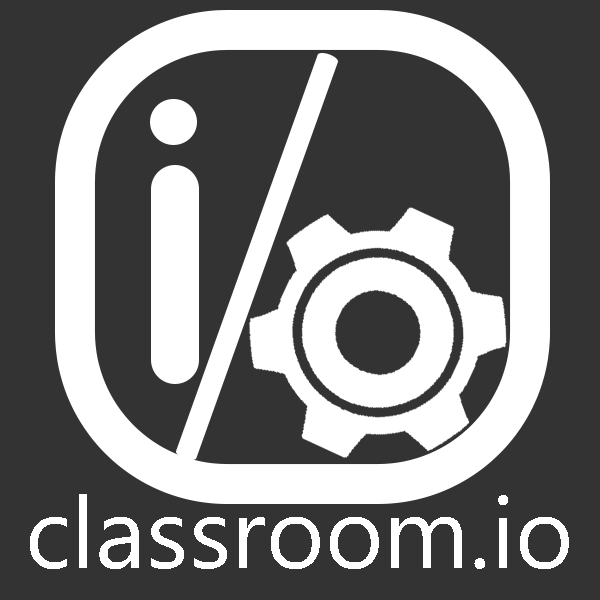
<style>
.page{position:relative;width:600px;height:600px;background:#333333}
.page>*{position:absolute;margin:0}
.t1{font:100px "MicrosoftPhagsPa";color:#ffffff}
</style>
<div class="page">
<p class="t1" style="left:30px;top:494px;width:539px;height:75px">classroom.io</p>
</div>
